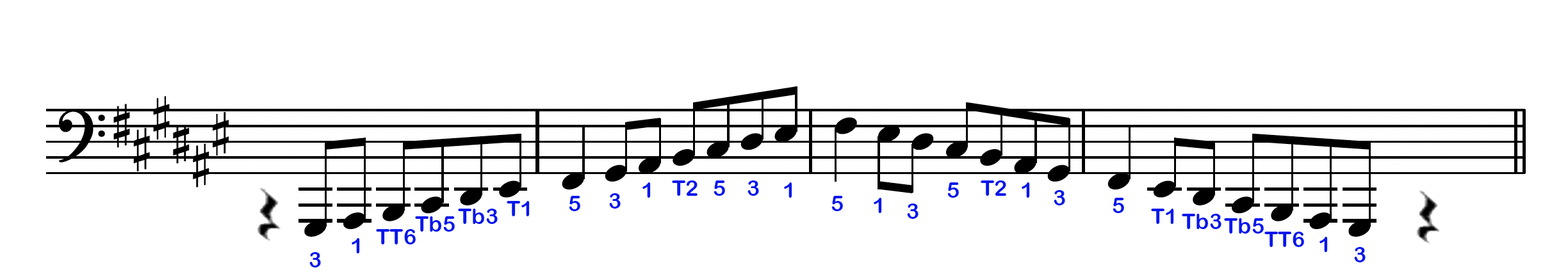
<style>
.page{position:relative;width:1568px;height:279px;background:#ffffff}
.page>*{position:absolute;margin:0}
.t1{font:21.8px "ArialRoundedMTBold";color:#0417ec}
</style>
<div class="page">
<p class="t1" style="left:642px;top:183px;width:9px;height:15px">1</p>
<p class="t1" style="left:672px;top:181px;width:26px;height:15px">T2</p>
<p class="t1" style="left:714px;top:181px;width:11px;height:15px">5</p>
<p class="t1" style="left:747px;top:181px;width:12px;height:15px">3</p>
<p class="t1" style="left:784px;top:183px;width:8px;height:15px">1</p>
<p class="t1" style="left:947px;top:183px;width:12px;height:15px">5</p>
<p class="t1" style="left:981px;top:181px;width:25px;height:15px">T2</p>
<p class="t1" style="left:1022px;top:183px;width:8px;height:15px">1</p>
<p class="t1" style="left:569px;top:196px;width:11px;height:15px">5</p>
<p class="t1" style="left:609px;top:193px;width:12px;height:16px">3</p>
<p class="t1" style="left:831px;top:196px;width:12px;height:15px">5</p>
<p class="t1" style="left:874px;top:198px;width:8px;height:15px">1</p>
<p class="t1" style="left:1054px;top:190px;width:11px;height:16px">3</p>
<p class="t1" style="left:1113px;top:198px;width:11px;height:15px">5</p>
<p class="t1" style="left:458px;top:209px;width:40px;height:15px">Tb3</p>
<p class="t1" style="left:507px;top:201px;width:23px;height:15px">T1</p>
<p class="t1" style="left:907px;top:204px;width:12px;height:15px">3</p>
<p class="t1" style="left:1151px;top:209px;width:23px;height:15px">T1</p>
<p class="t1" style="left:415px;top:216px;width:40px;height:16px">Tb5</p>
<p class="t1" style="left:1182px;top:214px;width:39px;height:15px">Tb3</p>
<p class="t1" style="left:1224px;top:218px;width:40px;height:16px">Tb5</p>
<p class="t1" style="left:376px;top:229px;width:40px;height:16px">TT6</p>
<p class="t1" style="left:1264px;top:232px;width:40px;height:15px">TT6</p>
<p class="t1" style="left:352px;top:238px;width:8px;height:16px">1</p>
<p class="t1" style="left:1319px;top:237px;width:9px;height:15px">1</p>
<p class="t1" style="left:309px;top:252px;width:12px;height:16px">3</p>
<p class="t1" style="left:1354px;top:247px;width:12px;height:16px">3</p>
</div>
